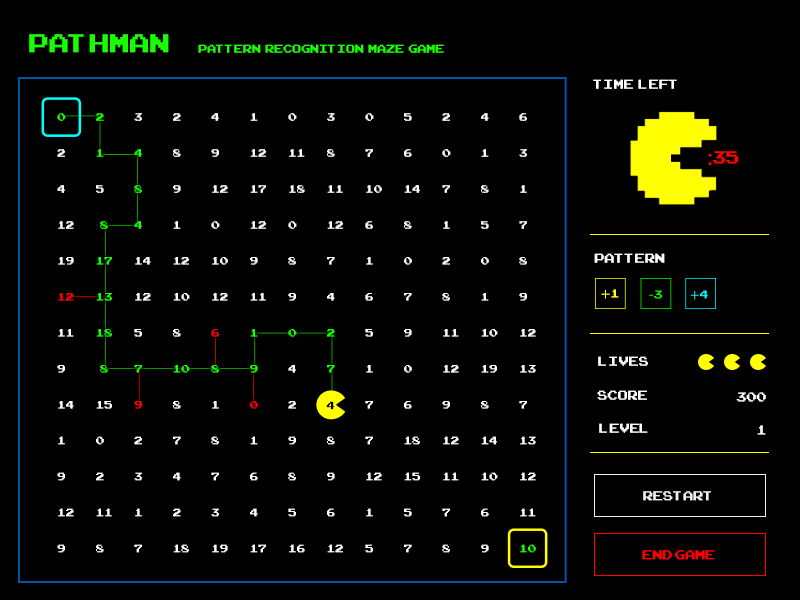
<style>
.page{position:relative;width:800px;height:600px;background:#000000}
.page>*{position:absolute;margin:0}
.t1{font:36px "ArcadeClassic";letter-spacing:0.01em;color:#18ff00}
.t2{font:16px "ArcadeClassic";letter-spacing:0.01em;color:#18ff00}
.t3{font:18px "ArcadeClassic";letter-spacing:0.01em;color:#ffffff}
.t4{font:15px "ArcadeClassic";letter-spacing:0.01em;color:#ffffff}
.t5{font:15px "ArcadeClassic";letter-spacing:0.01em;color:#18ff00}
.t6{font:15px "ArcadeClassic";letter-spacing:0.01em;color:#ff0000}
.t7{font:24px "ArcadeClassic";letter-spacing:0.01em;color:#ff0000}
.t8{font:24px "MyriadPro-Regular";letter-spacing:0.01em;color:#ff0000}
.t9{font:16px "MyriadPro-Regular";letter-spacing:0.01em;color:#ffff00}
.t10{font:16px "ArcadeClassic";letter-spacing:0.01em;color:#ffff00}
.t11{font:16px "MyriadPro-Regular";letter-spacing:0.01em;color:#00ff00}
.t12{font:16px "ArcadeClassic";letter-spacing:0.01em;color:#00ff00}
.t13{font:16px "MyriadPro-Regular";letter-spacing:0.01em;color:#00f6ff}
.t14{font:16px "ArcadeClassic";letter-spacing:0.01em;color:#00f6ff}
.t15{font:15px "ArcadeClassic";letter-spacing:0.01em;color:#010101}
.t16{font:18px "ArcadeClassic";letter-spacing:0.01em;color:#f0f0f0}
.t17{font:18px "ArcadeClassic";letter-spacing:0.01em;color:#ff0000}
</style>
<div class="page">
<p class="t1" style="left:29px;top:34px;width:140px;height:19px">PathMan</p>
<p class="t2" style="left:198px;top:44px;width:246px;height:9px">Pattern  recognition  maze  game</p>
<p class="t3" style="left:593px;top:79px;width:84px;height:10px">Time  Left</p>
<p class="t4" style="left:57px;top:113px;width:479px;height:440px"><span class="t5">0 2</span> 3 2 4 1 0 3 0 5 2 4 6<br><br>2 <span class="t5">1 4</span> 8 9 12 11 8 7 6 0 1 3<br><br>4 5 <span class="t5">8</span> 9 12 17 18 11 10 14 7 8 1<br><br>12   <span class="t5">8 4</span> 1 0 12 0 12 6 8 1 5 7<br><br>19 <span class="t5">17</span> 14 12 10 9 8 7 1 0 2 0 8<br><br><span class="t6">12 </span><span class="t5">13</span> 12 10 12 11 9 4 6 7 8 1 9<br><br>11 <span class="t5">18</span> 5 8 <span class="t6">6 </span><span class="t5">1 0 2</span> 5 9 11 10 12<br><br>9   <span class="t5">8 7 10 8 9</span> 4 <span class="t5">7</span> 1 0 12 19 13<br><br>14 15 <span class="t6">9</span> 8 1 <span class="t6">0</span> 2  7 6 9 8 7<br><br>1 0 2    7 8 1 9 8 7 18 12 14 13<br><br>9 2 3 4 7 6 8 9 12 15 11 10 12<br><br>12 11 1 2 3 4 5 6 1 5 7 6 11<br><br>9 8 7 18 19 17 16 12 5 7 8 9 <span class="t5">10</span></p>
<p class="t7" style="left:708px;top:151px;width:31px;height:15px"><span class="t8">:</span>35</p>
<p class="t3" style="left:594px;top:253px;width:71px;height:10px">Pattern</p>
<p class="t9" style="left:601px;top:289px;width:18px;height:10px">+<span class="t10">1</span></p>
<p class="t11" style="left:649px;top:290px;width:13px;height:9px">-<span class="t12">3</span></p>
<p class="t13" style="left:690px;top:290px;width:18px;height:10px">+<span class="t14">4</span></p>
<p class="t3" style="left:598px;top:356px;width:50px;height:10px">Lives</p>
<p class="t3" style="left:597px;top:390px;width:50px;height:10px">Score</p>
<p class="t15" style="left:326px;top:401px;width:9px;height:9px">4</p>
<p class="t3" style="left:736px;top:392px;width:30px;height:10px">300</p>
<p class="t3" style="left:599px;top:423px;width:49px;height:10px">Level</p>
<p class="t3" style="left:757px;top:425px;width:9px;height:10px">1</p>
<p class="t16" style="left:643px;top:491px;width:68px;height:10px">restart</p>
<p class="t17" style="left:642px;top:550px;width:73px;height:10px">End Game</p>
</div>
